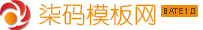
<style>
.page{position:relative;width:203px;height:30px;background:#ffffff}
.page>*{position:absolute;margin:0}
.t1{font:22.9px "YouYuan";letter-spacing:0.01em;color:#f08c0d;text-transform:uppercase;scale:1.04 1}
.t2{font:7.6px "ArialMT";letter-spacing:0.03em;color:#6d3f06;text-transform:uppercase;scale:1.05 1}
</style>
<div class="page">
<p class="t1" style="left:39px;top:3px;width:117px;height:23px">柒码模板网</p>
<p class="t2" style="left:164px;top:8px;width:31px;height:6px">bate1.0</p>
</div>
